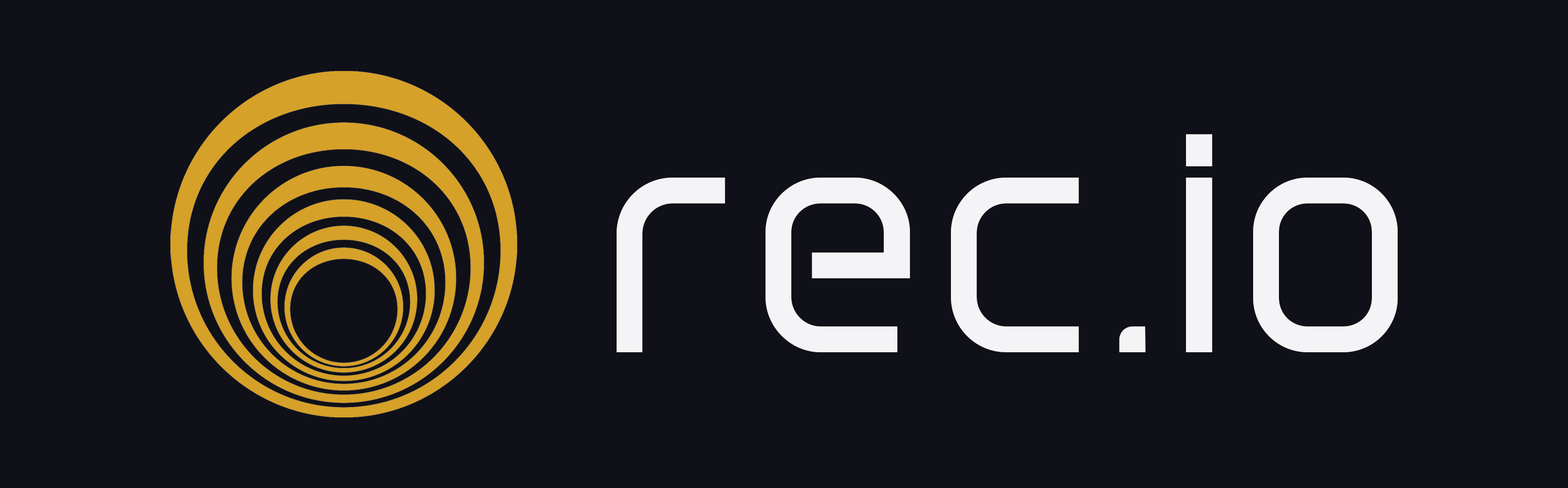
<style>
.page{position:relative;width:1568px;height:488px;background:#101018}
.page>*{position:absolute;margin:0}
.t1{font:339.8px "Ocean-SemiBold";color:#f4f4f6}
</style>
<div class="page">
<p class="t1" style="left:617px;top:134px;width:781px;height:218px">rec.io</p>
</div>
